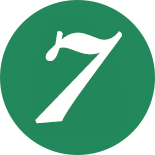
<style>
.page{position:relative;width:155px;height:155px;background:#22885c}
.page>*{position:absolute;margin:0}
.t1{font:130px "SnellRoundhand-Black";color:#fffffe;font-weight:bold}
</style>
<div class="page">
<p class="t1" style="left:35px;top:31px;width:87px;height:93px">7</p>
</div>
